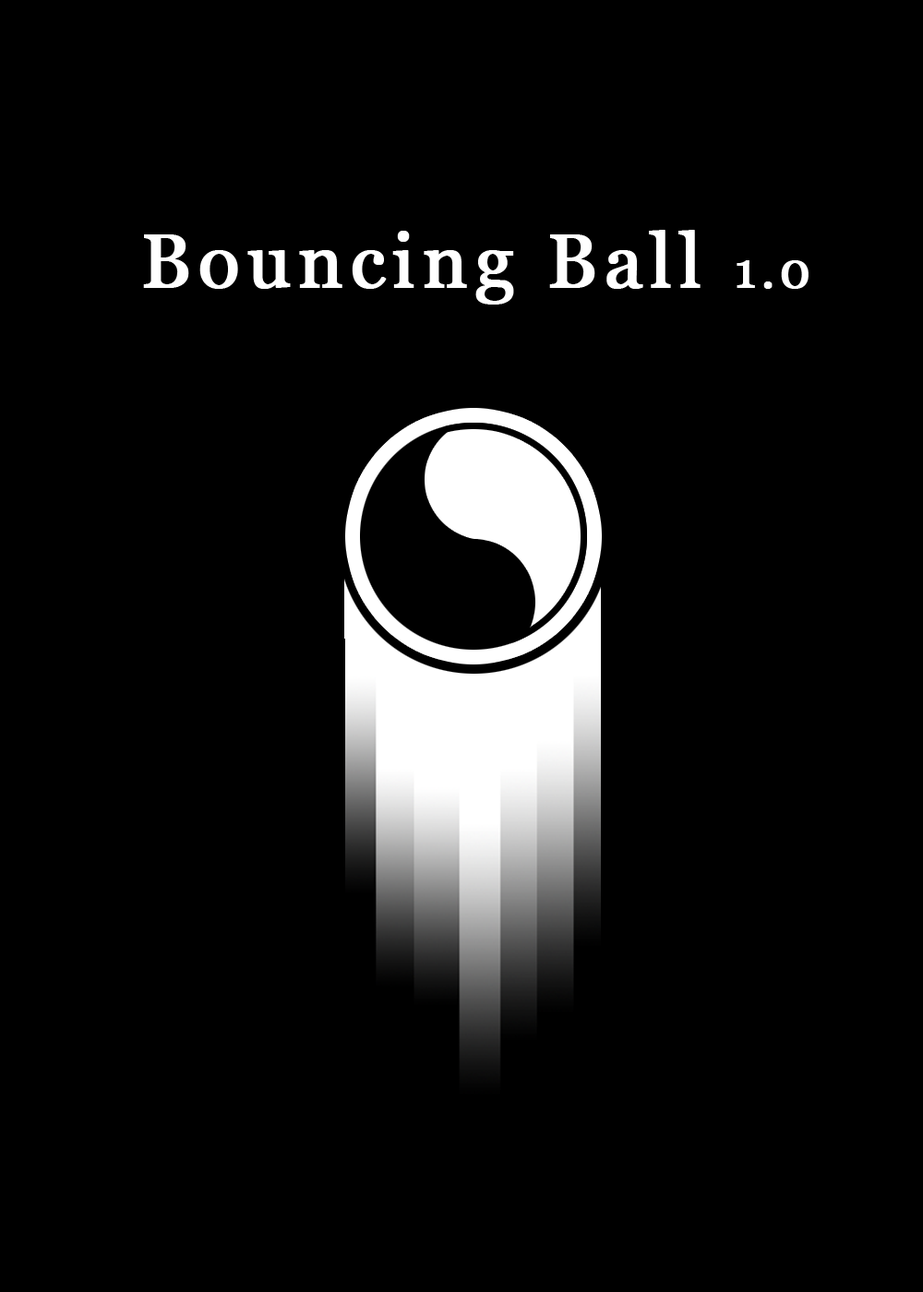
<style>
.page{position:relative;width:923px;height:1292px;background:#000000}
.page>*{position:absolute;margin:0}
.t1{font:75.6px "Georgia";letter-spacing:0.075em;color:#ffffff;font-weight:bold}
.t2{font:50px "Georgia";letter-spacing:0.075em;color:#ffffff;font-weight:bold}
</style>
<div class="page">
<p class="t1" style="left:143px;top:230px;width:665px;height:75px">Bouncing Ball <span class="t2">1.0</span></p>
</div>
